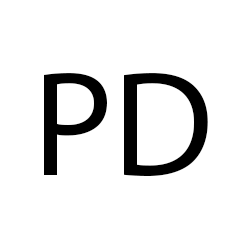
<style>
.page{position:relative;width:250px;height:250px;background:#ffffff}
.page>*{position:absolute;margin:0}
.t1{font:150px "MyriadPro-Regular";color:#000000}
</style>
<div class="page">
<p class="t1" style="left:44px;top:73px;width:164px;height:103px">PD</p>
</div>
